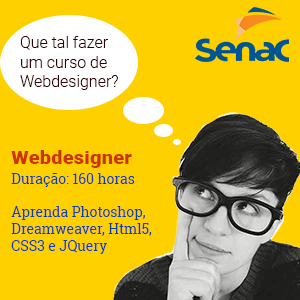
<style>
.page{position:relative;width:300px;height:300px;background:#ffd000}
.page>*{position:absolute;margin:0}
.t1{font:16px "Roboto-Light";color:#330000}
.t2{font:18px "Roboto-Black";color:#cc3300;scale:1.13 1}
.t3{font:14px "RobotoSlab-Regular";color:#0c3db2}
</style>
<div class="page">
<p class="t1" style="left:20px;top:36px;width:98px;height:54px">Que tal fazer <br>um curso de<br>Webdesigner?</p>
<p class="t2" style="left:11px;top:150px;width:121px;height:18px">Webdesigner</p>
<p class="t3" style="left:11px;top:173px;width:141px;height:81px">Duração: 160 horas<br><br>Aprenda Photoshop, Dreamweaver, Html5, CSS3 e JQuery</p>
</div>
